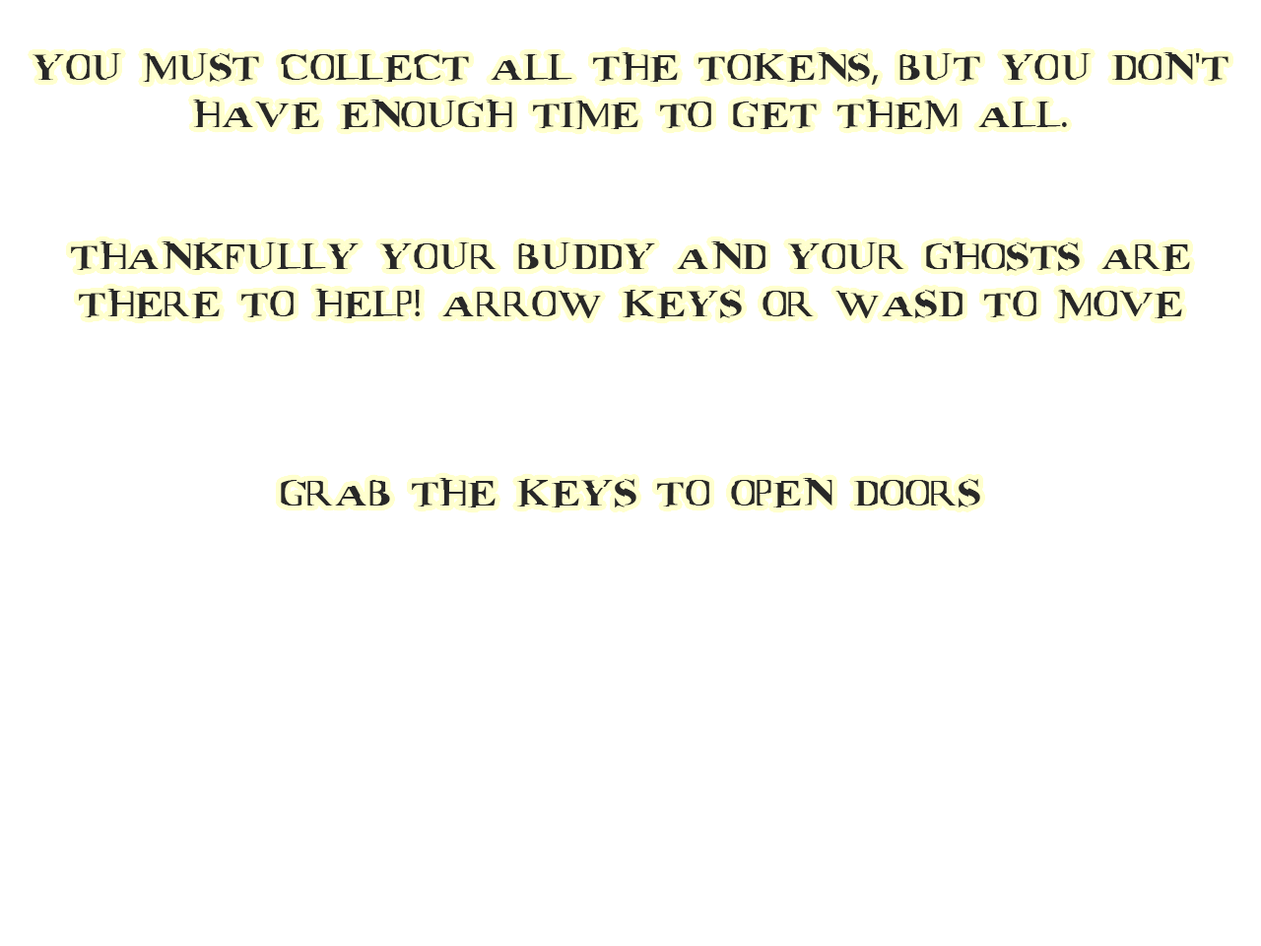
<style>
.page{position:relative;width:1261px;height:946px;background:#ffffff}
.page>*{position:absolute;margin:0}
.t1{font:39.4px "Matrix";color:#282828}
.t2{font:39.4px "MyriadPro-Regular";color:#282828}
</style>
<div class="page">
<p class="t1" style="left:33px;top:52px;width:1195px;height:455px;text-align:center">YOU MUST COLLECT ALL THE TOKENS<span class="t2">,</span> BUT YOU DON<span class="t2">'</span>T HAVE ENOUGH TIME TO GET THEM ALL<span class="t2">.</span> <br><br><br>THANKFULLY YOUR BUDDY AND YOUR GHOSTS ARE THERE TO HELP<span class="t2">!</span> ARROW KEYS OR WASD TO MOVE<br><br><br><br>GRAB THE KEYS TO OPEN DOORS</p>
</div>
